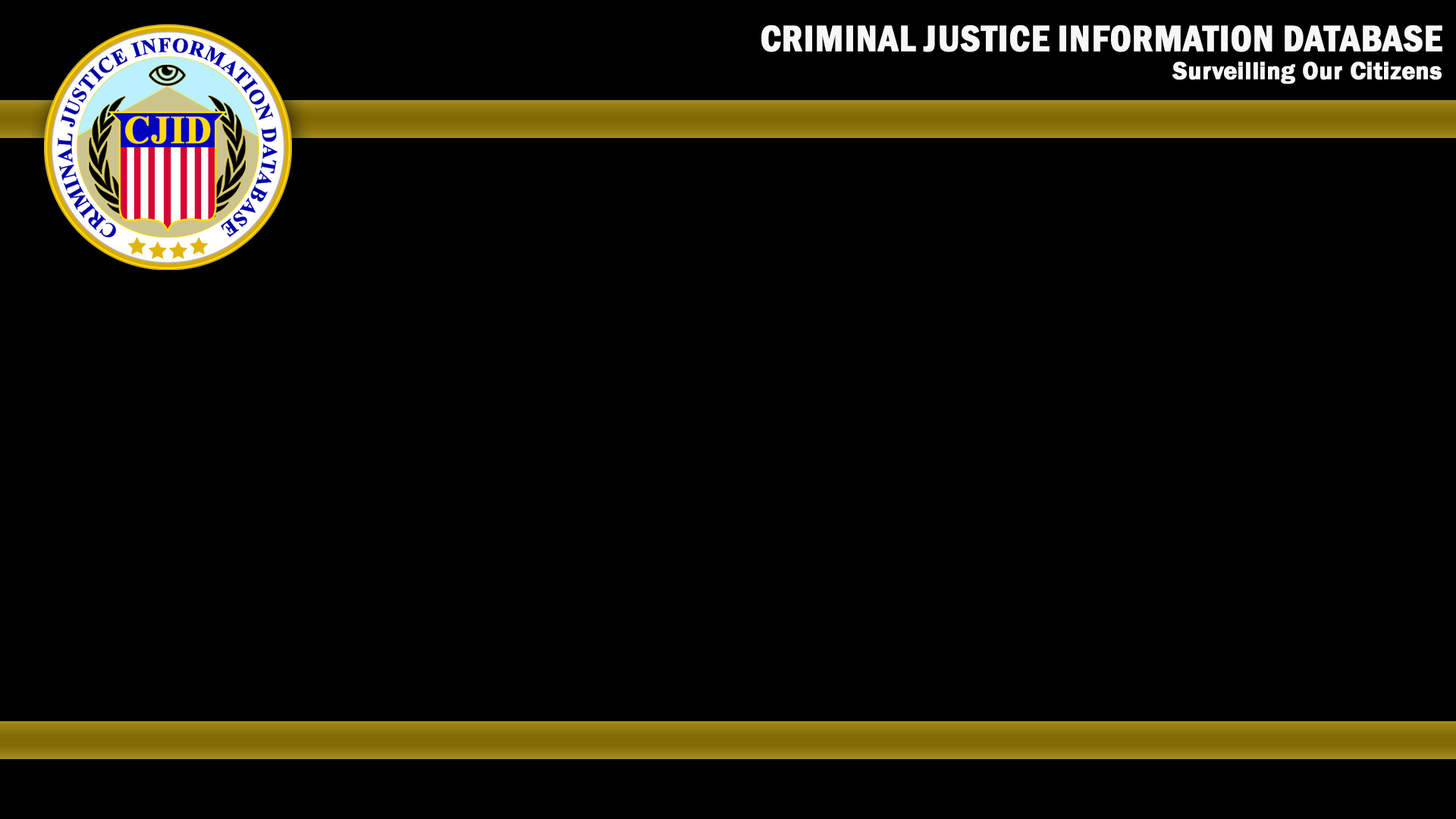
<style>
.page{position:relative;width:1456px;height:819px;background:#000000}
.page>*{position:absolute;margin:0}
.t1{font:37.9px "FranklinGothic-DemiCond";color:#ffffff;font-weight:bold}
.t2{font:25px "FranklinGothic-Demi";color:#ffffff;font-weight:bold}
</style>
<div class="page">
<p class="t1" style="left:761px;top:25px;width:681px;height:27px">CRIMINAL JUSTICE INFORMATION DATABASE</p>
<p class="t2" style="left:1172px;top:61px;width:270px;height:23px">Surveilling Our Citizens</p>
</div>
